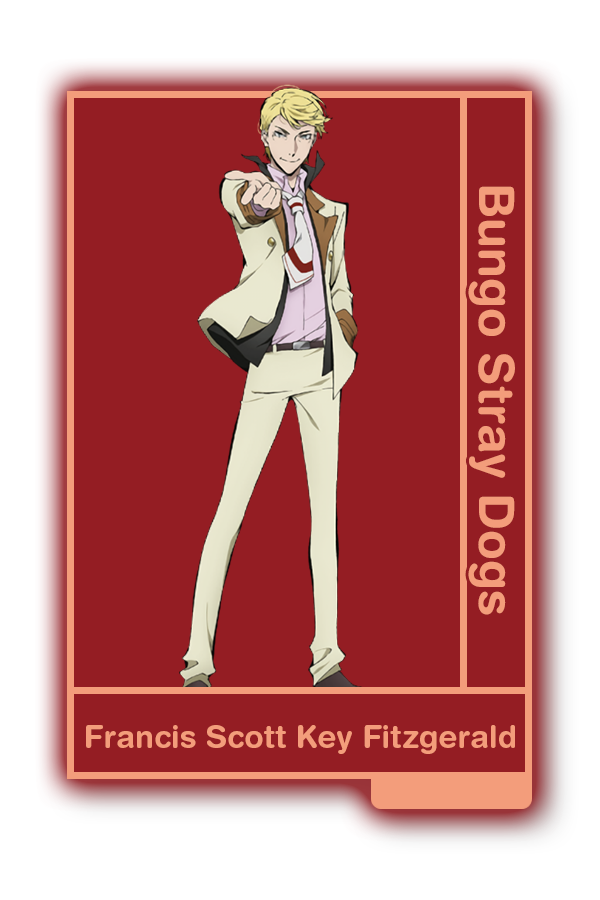
<style>
.page{position:relative;width:600px;height:900px;background:#941d23}
.page>*{position:absolute;margin:0}
.t1{font:48.8px "HelveticaRounded-Bold";color:#f39d7b}
.t2{font:31.2px "HelveticaRounded-Bold";color:#f39d7b}
</style>
<div class="page">
<p class="t1" style="left:468px;top:186px;width:47px;height:429px;rotate:90deg">Bungo Stray Dogs</p>
<p class="t2" style="left:86px;top:725px;width:429px;height:29px">Francis Scott Key Fitzgerald</p>
</div>
